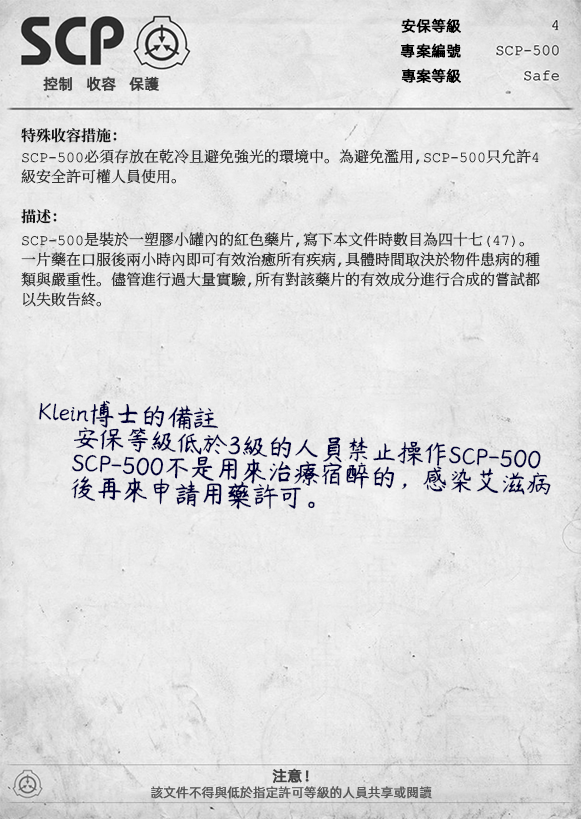
<style>
.page{position:relative;width:581px;height:819px}
.page>*{position:absolute;margin:0}
.t1{font:15px "AlibabaPuHuiTiR";color:#000000;font-weight:bold}
.t2{font:15px "AlibabaPuHuiTiR";color:#3d3d3d;font-weight:bold}
.t3{font:15px "ContainmentBreach-Bold";color:#121212}
.t4{font:15px/20px "ContainmentBreach-Regular";color:#353535}
.t5{font:26px/25px "YRDZSTJF";color:#000037}
.t6{font:15px "AlibabaPuHuiTiR";color:#414141;font-weight:bold}
.t7{font:13px "AlibabaPuHuiTiR";color:#575757}
</style>
<div class="page">
<p class="t1" style="left:401px;top:18px;width:60px;height:15px">安保等級</p>
<p class="t1" style="left:400px;top:43px;width:61px;height:15px">專案編號</p>
<p class="t2" style="left:43px;top:76px;width:116px;height:15px">控制   收容   保護</p>
<p class="t1" style="left:401px;top:68px;width:60px;height:15px">專案等級</p>
<p class="t3" style="left:21px;top:128px;width:96px;height:15px">特殊收容措施：</p>
<p class="t4" style="left:21px;top:149px;width:518px;height:35px">SCP-500必須存放在乾冷且避免強光的環境中。為避免濫用，SCP-500只允許4<br>級安全許可權人員使用。</p>
<p class="t3" style="left:21px;top:209px;width:36px;height:15px">描述：</p>
<p class="t4" style="left:21px;top:232px;width:519px;height:75px">SCP-500是裝於一塑膠小罐內的紅色藥片，寫下本文件時數目為四十七（47）。<br>一片藥在口服後兩小時內即可有效治癒所有疾病，具體時間取決於物件患病的種<br>類與嚴重性。儘管進行過大量實驗，所有對該藥片的有效成分進行合成的嘗試都<br>以失敗告終。</p>
<p class="t5" style="left:39px;top:400px;width:512px;height:110px;rotate:3deg">Klein博士的備註<br> 安保等級低於3級的人員禁止操作SCP-500<br> SCP-500不是用來治療宿醉的，感染艾滋病<br> 後再來申請用藥許可。</p>
<p class="t6" style="left:272px;top:768px;width:37px;height:15px">注意！</p>
<p class="t7" style="left:151px;top:786px;width:281px;height:13px">該文件不得與低於指定許可等級的人員共享或閱讀</p>
</div>
